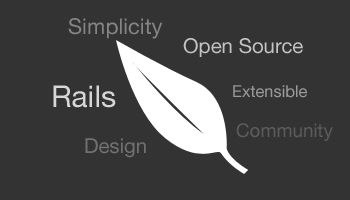
<style>
.page{position:relative;width:350px;height:200px;background:#333333}
.page>*{position:absolute;margin:0}
.t1{font:21.8px "HelveticaNeue";color:#858585}
.t2{font:20.4px "HelveticaNeue";color:#c3c3c3}
.t3{font:30px "HelveticaNeue";color:#d7d7d7}
.t4{font:16.3px "HelveticaNeue";color:#9a9a9a}
.t5{font:18.8px "HelveticaNeue";color:#5c5c5c}
.t6{font:20.4px "HelveticaNeue";color:#717171}
</style>
<div class="page">
<p class="t1" style="left:68px;top:18px;width:95px;height:21px">Simplicity</p>
<p class="t2" style="left:183px;top:38px;width:120px;height:19px">Open Source</p>
<p class="t3" style="left:53px;top:85px;width:63px;height:23px">Rails</p>
<p class="t4" style="left:233px;top:85px;width:74px;height:13px">Extensible</p>
<p class="t5" style="left:236px;top:123px;width:97px;height:18px">Community</p>
<p class="t6" style="left:85px;top:138px;width:61px;height:20px">Design</p>
</div>
